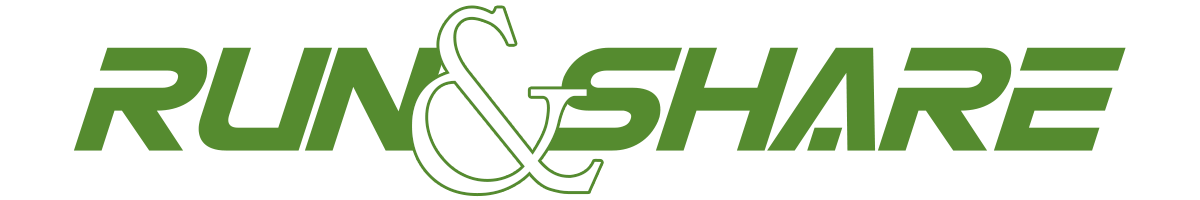
<style>
.page{position:relative;width:1200px;height:200px;background:#ffffff}
.page>*{position:absolute;margin:0}
.t1{font:150px "EurofighterItalic";letter-spacing:-0.06em;color:#558b2f}
</style>
<div class="page">
<p class="t1" style="left:73px;top:47px;width:1053px;height:104px">RUN  SHARE</p>
</div>
